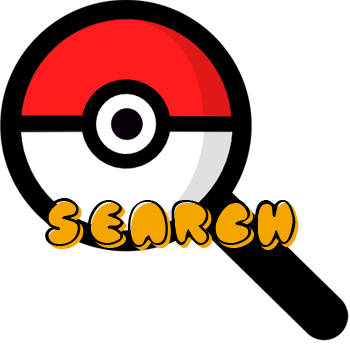
<style>
.page{position:relative;width:350px;height:350px;background:#ffffff}
.page>*{position:absolute;margin:0}
.t1{font:54px "Fatassoutline";color:#000000}
.t2{font:54px "Fatassfilled";color:#f3a600}
</style>
<div class="page">
<p class="t1" style="left:45px;top:198px;width:251px;height:49px">Search</p>
<p class="t2" style="left:48px;top:201px;width:251px;height:49px">Search</p>
</div>
